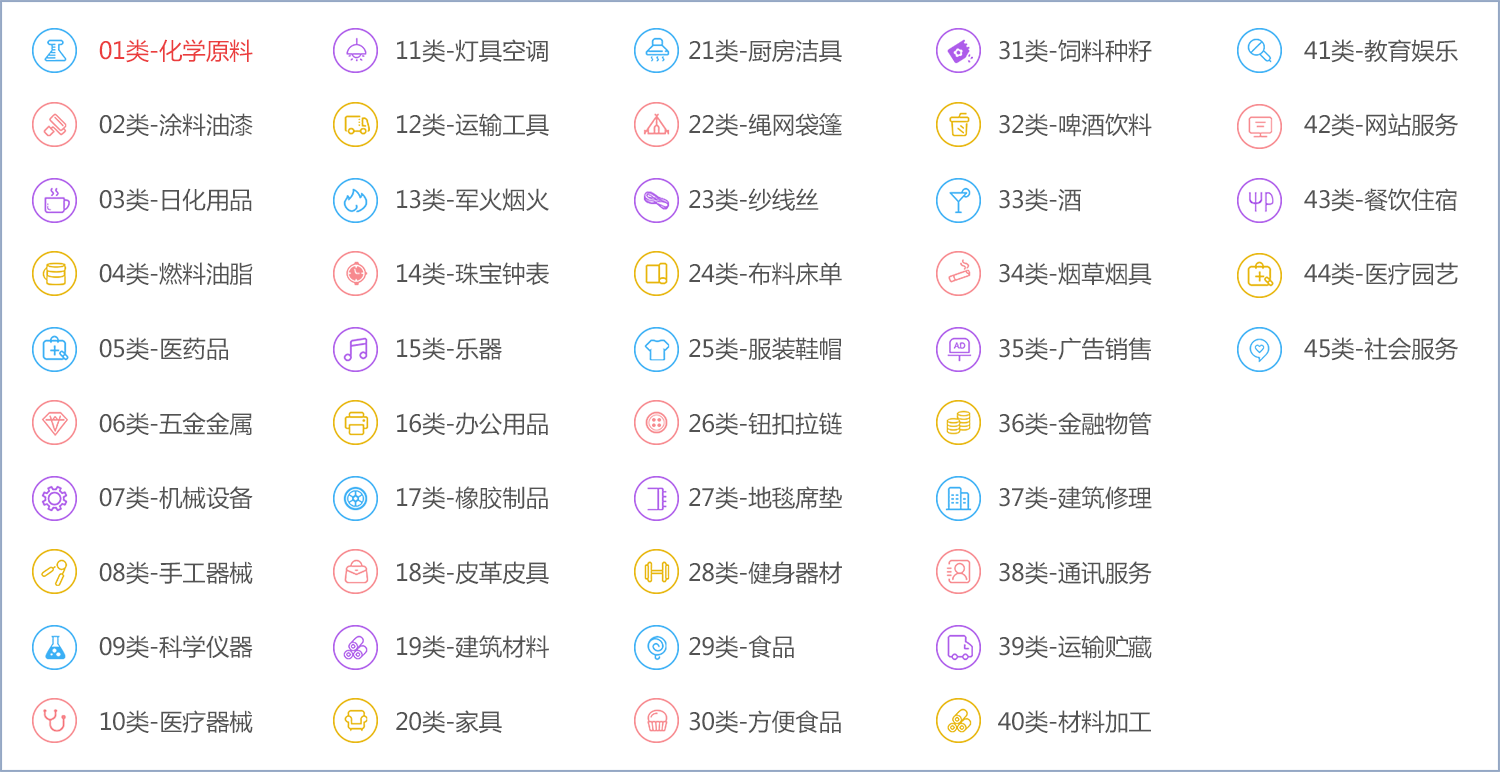
<style>
.page{position:relative;width:1500px;height:772px;background:#ffffff}
.page>*{position:absolute;margin:0}
.t1{font:23.4px/74.5px "MicrosoftYaHei";color:#535353}
.t2{font:23.4px/74.5px "MicrosoftYaHei";color:#eb3d3d}
</style>
<div class="page">
<p class="t1" style="left:99px;top:39px;width:154px;height:695px"><span class="t2">01类-化学原料</span> <br>02类-涂料油漆 <br>03类-日化用品 <br>04类-燃料油脂 <br>05类-医药品 <br>06类-五金金属 <br>07类-机械设备 <br>08类-手工器械 <br>09类-科学仪器<br>10类-医疗器械</p>
<p class="t1" style="left:396px;top:39px;width:153px;height:695px">11类-灯具空调 <br>12类-运输工具 <br>13类-军火烟火 <br>14类-珠宝钟表 <br>15类-乐器 <br>16类-办公用品 <br>17类-橡胶制品 <br>18类-皮革皮具<br>19类-建筑材料 <br>20类-家具</p>
<p class="t1" style="left:689px;top:39px;width:153px;height:695px">21类-厨房洁具 <br>22类-绳网袋篷 <br>23类-纱线丝 <br>24类-布料床单 <br>25类-服装鞋帽 <br>26类-钮扣拉链 <br>27类-地毯席垫<br>28类-健身器材 <br>29类-食品 <br>30类-方便食品</p>
<p class="t1" style="left:998px;top:39px;width:154px;height:695px">31类-饲料种籽 <br>32类-啤酒饮料 <br>33类-酒 <br>34类-烟草烟具 <br>35类-广告销售 <br>36类-金融物管<br>37类-建筑修理 <br>38类-通讯服务 <br>39类-运输贮藏 <br>40类-材料加工</p>
<p class="t1" style="left:1304px;top:39px;width:154px;height:322px">41类-教育娱乐<br>42类-网站服务 <br>43类-餐饮住宿 <br>44类-医疗园艺 <br>45类-社会服务</p>
</div>
